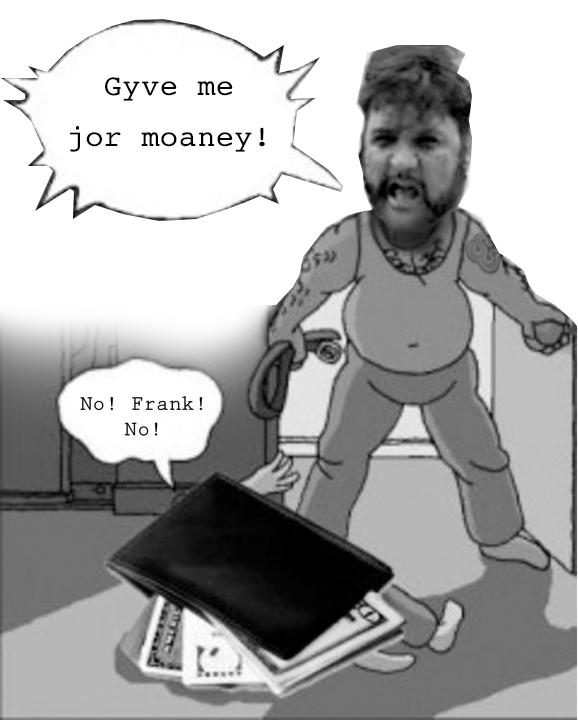
<style>
.page{position:relative;width:578px;height:720px;background:#ffffff}
.page>*{position:absolute;margin:0}
.t1{font:29.8px/50.2px "Courier";letter-spacing:0.025em;color:#000000}
</style>
<div class="page">
<p class="t1" style="left:70px;top:77px;width:195px;height:75px;text-align:center">Gyve me<br>jor moaney!</p>
</div>
